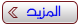
<style>
.page{position:relative;width:80px;height:25px}
.page>*{position:absolute;margin:0}
.t1{font:22px "MO_Nawel";letter-spacing:-0.08em;color:#0d0def}
</style>
<div class="page">
<p class="t1" style="left:26px;top:5px;width:35px;height:14px">ا  لمزيد</p>
</div>
